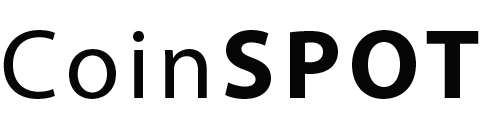
<style>
.page{position:relative;width:486px;height:126px;background:#ffffff}
.page>*{position:absolute;margin:0}
.t1{font:100px "MyriadPro-Regular";letter-spacing:0.075em;color:#060606}
.t2{font:100px "MyriadPro-Bold";letter-spacing:0.075em;color:#060606}
</style>
<div class="page">
<p class="t1" style="left:3px;top:30px;width:476px;height:69px">Coin<span class="t2">SPOT</span></p>
</div>
